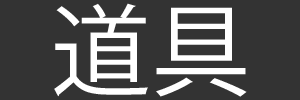
<style>
.page{position:relative;width:300px;height:100px;background:#333333}
.page>*{position:absolute;margin:0}
.t1{font:100px "KozGoPr6N-Regular";color:#ffffff}
</style>
<div class="page">
<p class="t1" style="left:54px;top:3px;width:193px;height:94px">道具</p>
</div>
